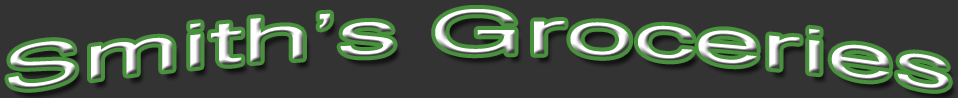
<style>
.page{position:relative;width:958px;height:98px;background:#333333}
.page>*{position:absolute;margin:0}
.t1{font:60px "Helvetica";scale:2 1}
</style>
<div class="page">
<p class="t1" style="left:8px;top:9px;width:941px;height:81px">Smith’s Groceries</p>
</div>
